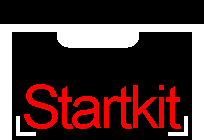
<style>
.page{position:relative;width:204px;height:140px;background:#000000}
.page>*{position:absolute;margin:0}
.t1{font:59.8px "ArialMT";letter-spacing:-0.06em;color:#ff0000}
</style>
<div class="page">
<p class="t1" style="left:24px;top:84px;width:157px;height:45px">Startkit</p>
</div>
